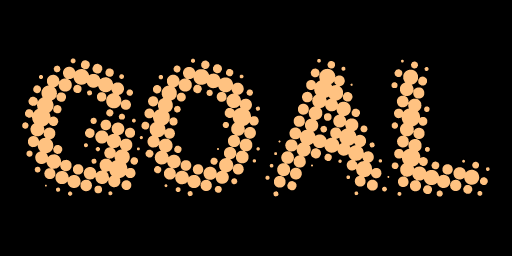
<style>
.page{position:relative;width:512px;height:256px;background:#000000}
.page>*{position:absolute;margin:0}
.t1{font:144px "[NEWSPIC-FONT]";color:#ffc281}
</style>
<div class="page">
<p class="t1" style="left:22px;top:58px;width:468px;height:139px">GOAL</p>
</div>
